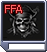
<style>
.page{position:relative;width:47px;height:52px}
.page>*{position:absolute;margin:0}
.t1{font:10.7px "Tahoma";color:#ff6666}
</style>
<div class="page">
<p class="t1" style="left:5px;top:5px;width:17px;height:8px">FFA</p>
</div>
